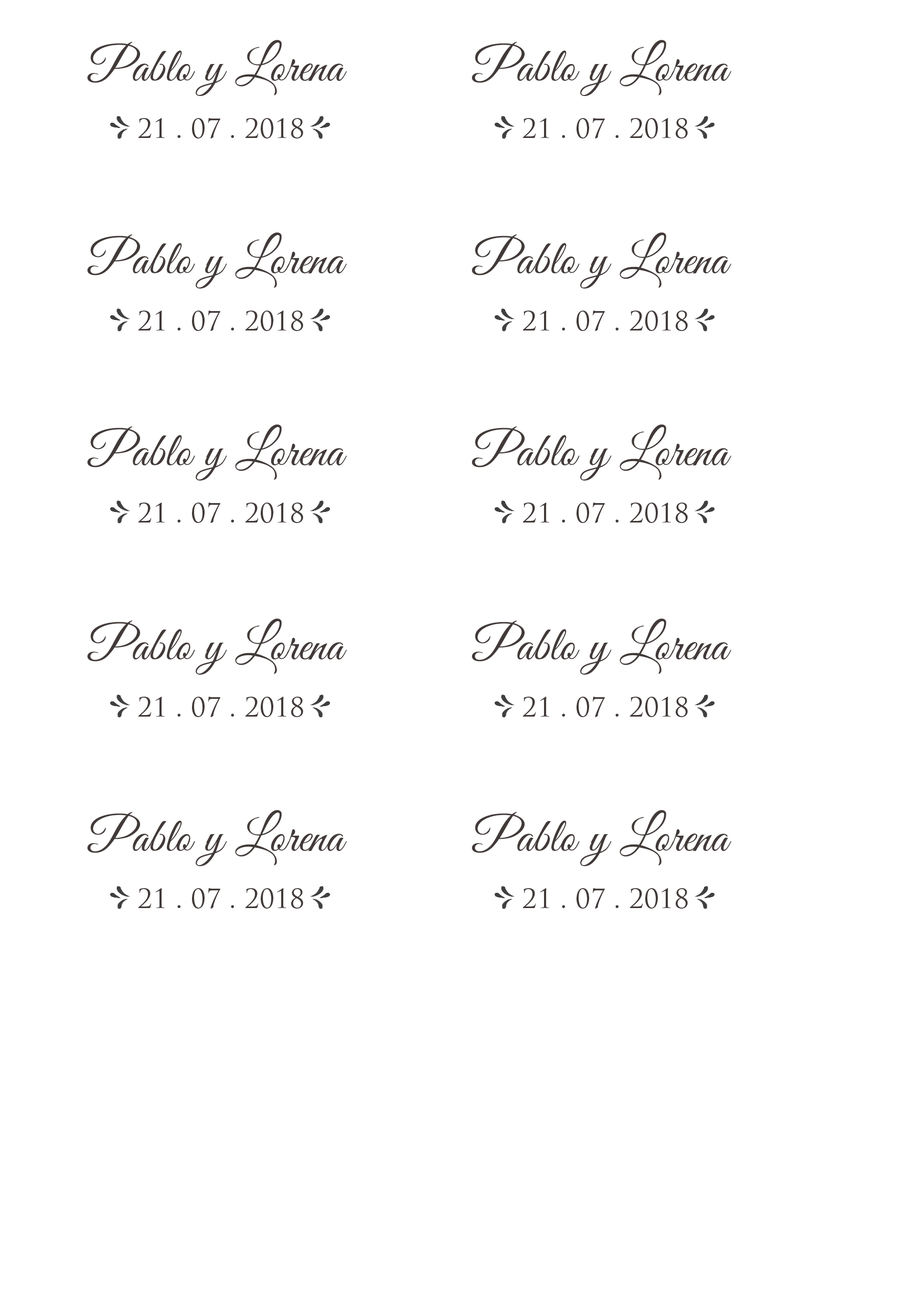
<style>
.page{position:relative;width:917px;height:1301px;background:#ffffff}
.page>*{position:absolute;margin:0}
.t1{font:48.1px "GreatVibes-Regular";color:#413a38}
.t2{font:26.2px "TrajanPro-Regular";color:#413a38}
</style>
<div class="page">
<p class="t1" style="left:87px;top:40px;width:260px;height:56px">Pablo y Lorena</p>
<p class="t1" style="left:471px;top:40px;width:260px;height:56px">Pablo y Lorena</p>
<p class="t2" style="left:138px;top:118px;width:165px;height:20px">21 . 07 . 2018</p>
<p class="t2" style="left:522px;top:118px;width:166px;height:20px">21 . 07 . 2018</p>
<p class="t1" style="left:87px;top:232px;width:260px;height:56px">Pablo y Lorena</p>
<p class="t1" style="left:471px;top:232px;width:260px;height:56px">Pablo y Lorena</p>
<p class="t2" style="left:138px;top:310px;width:165px;height:21px">21 . 07 . 2018</p>
<p class="t2" style="left:522px;top:310px;width:166px;height:21px">21 . 07 . 2018</p>
<p class="t1" style="left:87px;top:424px;width:260px;height:56px">Pablo y Lorena</p>
<p class="t1" style="left:471px;top:424px;width:260px;height:56px">Pablo y Lorena</p>
<p class="t2" style="left:138px;top:502px;width:165px;height:21px">21 . 07 . 2018</p>
<p class="t2" style="left:522px;top:502px;width:166px;height:21px">21 . 07 . 2018</p>
<p class="t1" style="left:87px;top:618px;width:260px;height:56px">Pablo y Lorena</p>
<p class="t1" style="left:471px;top:618px;width:260px;height:56px">Pablo y Lorena</p>
<p class="t2" style="left:138px;top:696px;width:165px;height:21px">21 . 07 . 2018</p>
<p class="t2" style="left:522px;top:696px;width:166px;height:21px">21 . 07 . 2018</p>
<p class="t1" style="left:87px;top:810px;width:260px;height:56px">Pablo y Lorena</p>
<p class="t1" style="left:471px;top:810px;width:260px;height:56px">Pablo y Lorena</p>
<p class="t2" style="left:138px;top:888px;width:165px;height:20px">21 . 07 . 2018</p>
<p class="t2" style="left:522px;top:888px;width:166px;height:20px">21 . 07 . 2018</p>
</div>
